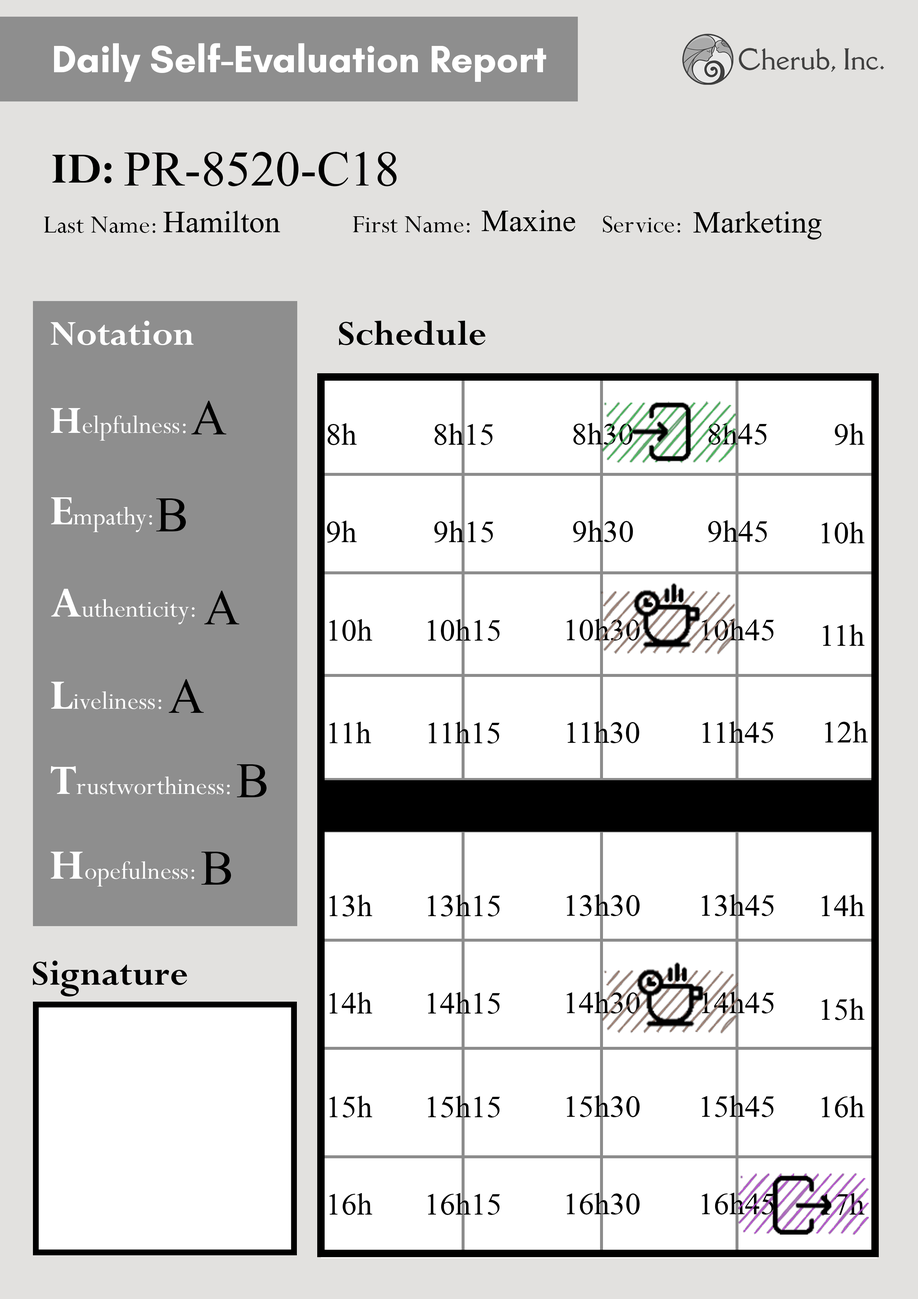
<style>
.page{position:relative;width:918px;height:1299px;background:#ffffff}
.page>*{position:absolute;margin:0}
.t1{font:74px "Microsoft-Himalaya";color:#000000}
.t2{font:46.3px "Microsoft-Himalaya";color:#000000}
</style>
<div class="page">
<p class="t1" style="left:124px;top:152px;width:273px;height:34px">PR-8520-C18</p>
<p class="t2" style="left:482px;top:210px;width:93px;height:21px">Maxine</p>
<p class="t2" style="left:163px;top:211px;width:117px;height:21px">Hamilton</p>
<p class="t2" style="left:693px;top:211px;width:129px;height:29px">Marketing</p>
<p class="t1" style="left:191px;top:401px;width:36px;height:33px">A</p>
<p class="t2" style="left:328px;top:423px;width:29px;height:22px">8h</p>
<p class="t2" style="left:435px;top:423px;width:58px;height:22px">8h15</p>
<p class="t2" style="left:573px;top:423px;width:60px;height:22px">8h30</p>
<p class="t2" style="left:709px;top:423px;width:58px;height:22px">8h45</p>
<p class="t2" style="left:835px;top:423px;width:30px;height:22px">9h</p>
<p class="t1" style="left:156px;top:498px;width:30px;height:33px">B</p>
<p class="t2" style="left:327px;top:521px;width:30px;height:21px">9h</p>
<p class="t2" style="left:434px;top:521px;width:60px;height:21px">9h15</p>
<p class="t2" style="left:573px;top:520px;width:60px;height:22px">9h30</p>
<p class="t2" style="left:708px;top:520px;width:59px;height:22px">9h45</p>
<p class="t2" style="left:822px;top:522px;width:43px;height:21px">10h</p>
<p class="t1" style="left:204px;top:591px;width:36px;height:33px">A</p>
<p class="t2" style="left:329px;top:619px;width:43px;height:22px">10h</p>
<p class="t2" style="left:428px;top:619px;width:72px;height:22px">10h15</p>
<p class="t2" style="left:566px;top:619px;width:74px;height:21px">10h30</p>
<p class="t2" style="left:702px;top:619px;width:72px;height:21px">10h45</p>
<p class="t2" style="left:823px;top:624px;width:42px;height:22px">11h</p>
<p class="t1" style="left:169px;top:679px;width:35px;height:34px">A</p>
<p class="t2" style="left:329px;top:722px;width:42px;height:21px">11h</p>
<p class="t2" style="left:428px;top:722px;width:72px;height:21px">11h15</p>
<p class="t2" style="left:567px;top:721px;width:72px;height:22px">11h30</p>
<p class="t2" style="left:702px;top:721px;width:72px;height:22px">11h45</p>
<p class="t2" style="left:825px;top:721px;width:43px;height:21px">12h</p>
<p class="t1" style="left:237px;top:764px;width:30px;height:33px">B</p>
<p class="t1" style="left:201px;top:852px;width:30px;height:32px">B</p>
<p class="t2" style="left:329px;top:894px;width:43px;height:22px">13h</p>
<p class="t2" style="left:428px;top:894px;width:72px;height:22px">13h15</p>
<p class="t2" style="left:566px;top:894px;width:74px;height:22px">13h30</p>
<p class="t2" style="left:702px;top:894px;width:72px;height:22px">13h45</p>
<p class="t2" style="left:822px;top:894px;width:43px;height:22px">14h</p>
<p class="t2" style="left:329px;top:992px;width:43px;height:21px">14h</p>
<p class="t2" style="left:428px;top:992px;width:72px;height:22px">14h15</p>
<p class="t2" style="left:566px;top:991px;width:74px;height:22px">14h30</p>
<p class="t2" style="left:702px;top:991px;width:72px;height:22px">14h45</p>
<p class="t2" style="left:822px;top:998px;width:43px;height:22px">15h</p>
<p class="t2" style="left:329px;top:1095px;width:43px;height:22px">15h</p>
<p class="t2" style="left:428px;top:1095px;width:72px;height:22px">15h15</p>
<p class="t2" style="left:566px;top:1095px;width:74px;height:22px">15h30</p>
<p class="t2" style="left:702px;top:1095px;width:72px;height:22px">15h45</p>
<p class="t2" style="left:822px;top:1095px;width:43px;height:22px">16h</p>
<p class="t2" style="left:329px;top:1193px;width:43px;height:22px">16h</p>
<p class="t2" style="left:428px;top:1193px;width:72px;height:22px">16h15</p>
<p class="t2" style="left:566px;top:1192px;width:74px;height:22px">16h30</p>
<p class="t2" style="left:702px;top:1192px;width:72px;height:22px">16h45</p>
<p class="t2" style="left:822px;top:1193px;width:43px;height:22px">17h</p>
</div>
